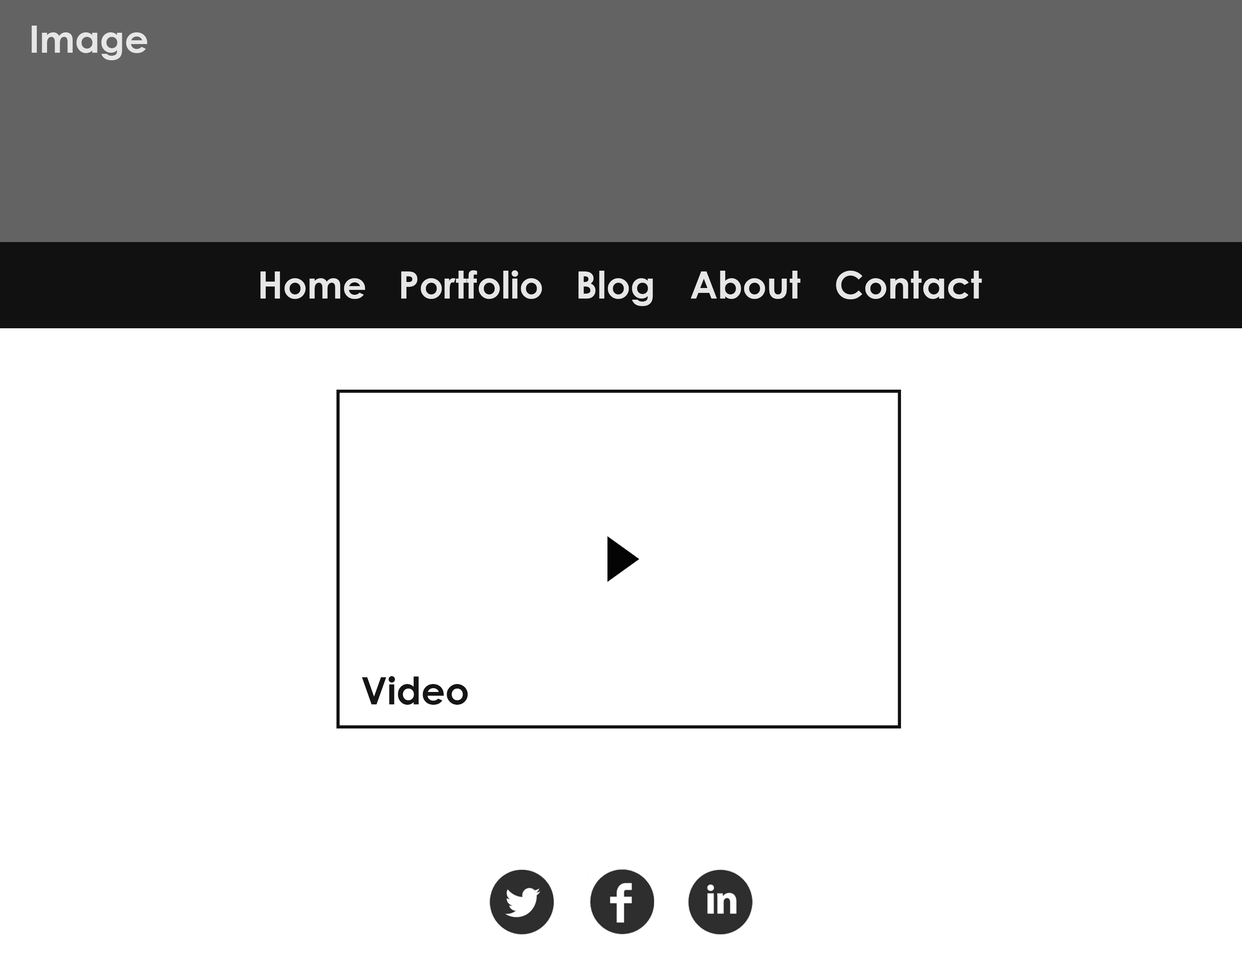
<style>
.page{position:relative;width:1242px;height:960px;background:#ffffff}
.page>*{position:absolute;margin:0}
.t1{font:37.6px "CenturyGothic-Bold";color:#e7e6e6}
.t2{font:37.6px "CenturyGothic-Bold";color:#151515}
</style>
<div class="page">
<p class="t1" style="left:32px;top:26px;width:115px;height:34px">Image</p>
<p class="t1" style="left:260px;top:271px;width:105px;height:28px">Home</p>
<p class="t1" style="left:401px;top:270px;width:141px;height:29px">Portfolio</p>
<p class="t1" style="left:579px;top:271px;width:74px;height:35px">Blog</p>
<p class="t1" style="left:691px;top:271px;width:110px;height:28px">About</p>
<p class="t1" style="left:836px;top:271px;width:146px;height:28px">Contact</p>
<p class="t2" style="left:362px;top:676px;width:106px;height:29px">Video</p>
</div>
